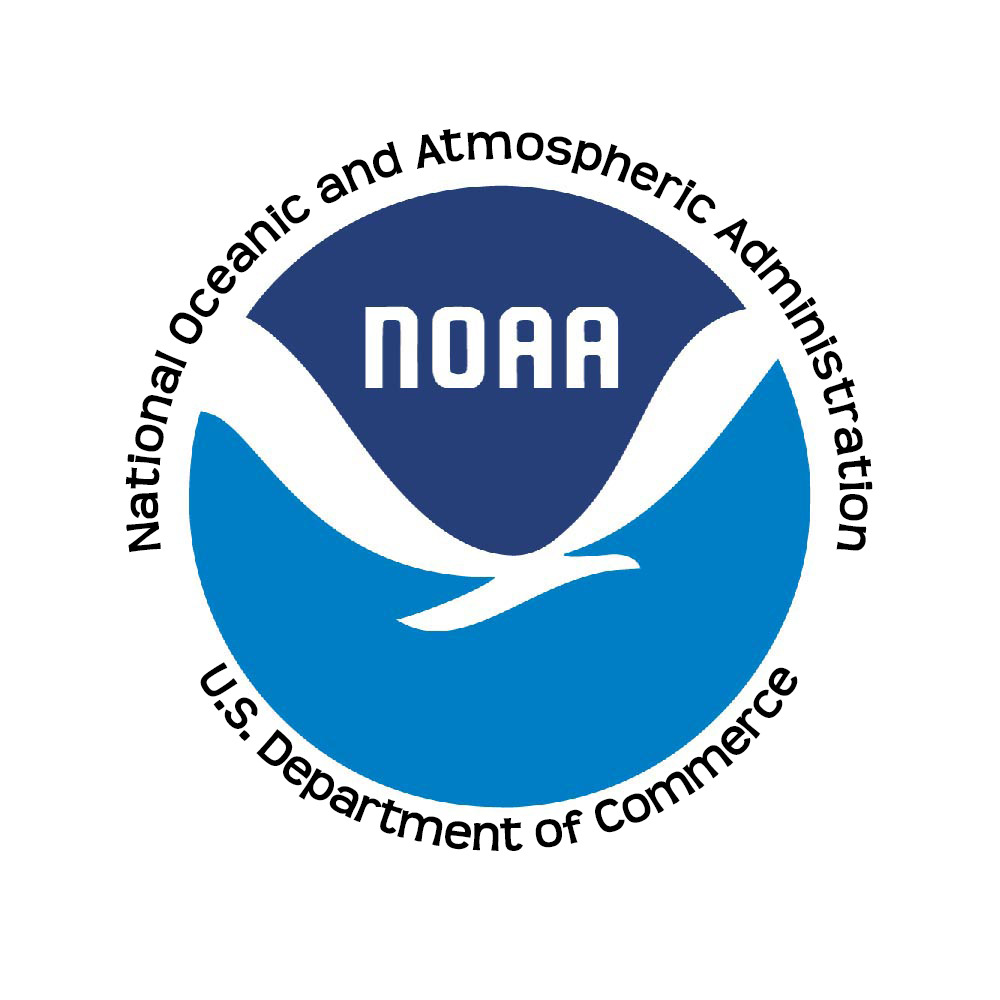
<style>
.page{position:relative;width:1000px;height:1000px;background:#ffffff}
.page>*{position:absolute;margin:0}
.t1{font:48.6px "Teen-Bold";color:#000000}
</style>
<div class="page">
<p class="t1" style="left:125px;top:129px;width:748px;height:424px;text-align:center">National Oceanic and Atmospheric Administration</p>
<p class="t1" style="left:200px;top:662px;width:598px;height:189px;text-align:center">U.S. Department of Commerce</p>
</div>
